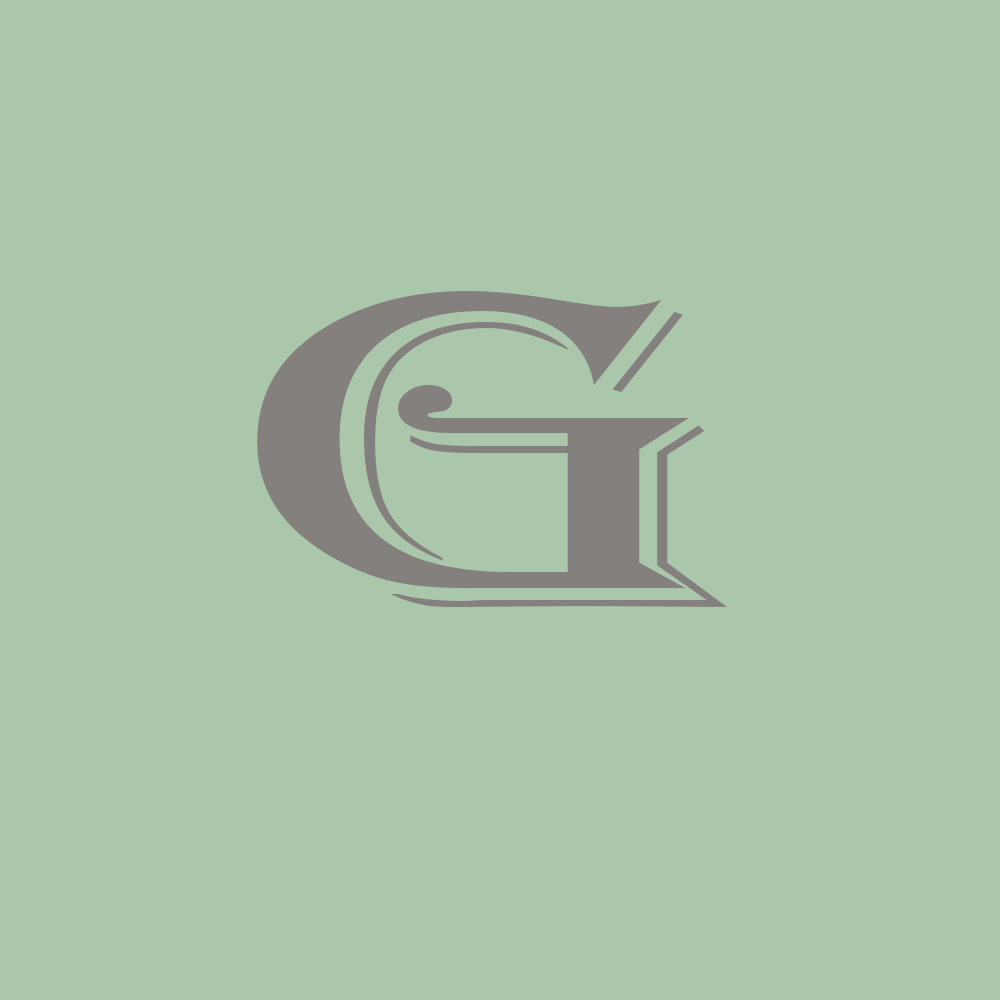
<style>
.page{position:relative;width:1000px;height:1000px;background:#abc7ab}
.page>*{position:absolute;margin:0}
.t1{font:472.2px "Algerian";color:#83807d;scale:1.56 1}
</style>
<div class="page">
<p class="t1" style="left:257px;top:291px;width:470px;height:316px">g</p>
</div>
